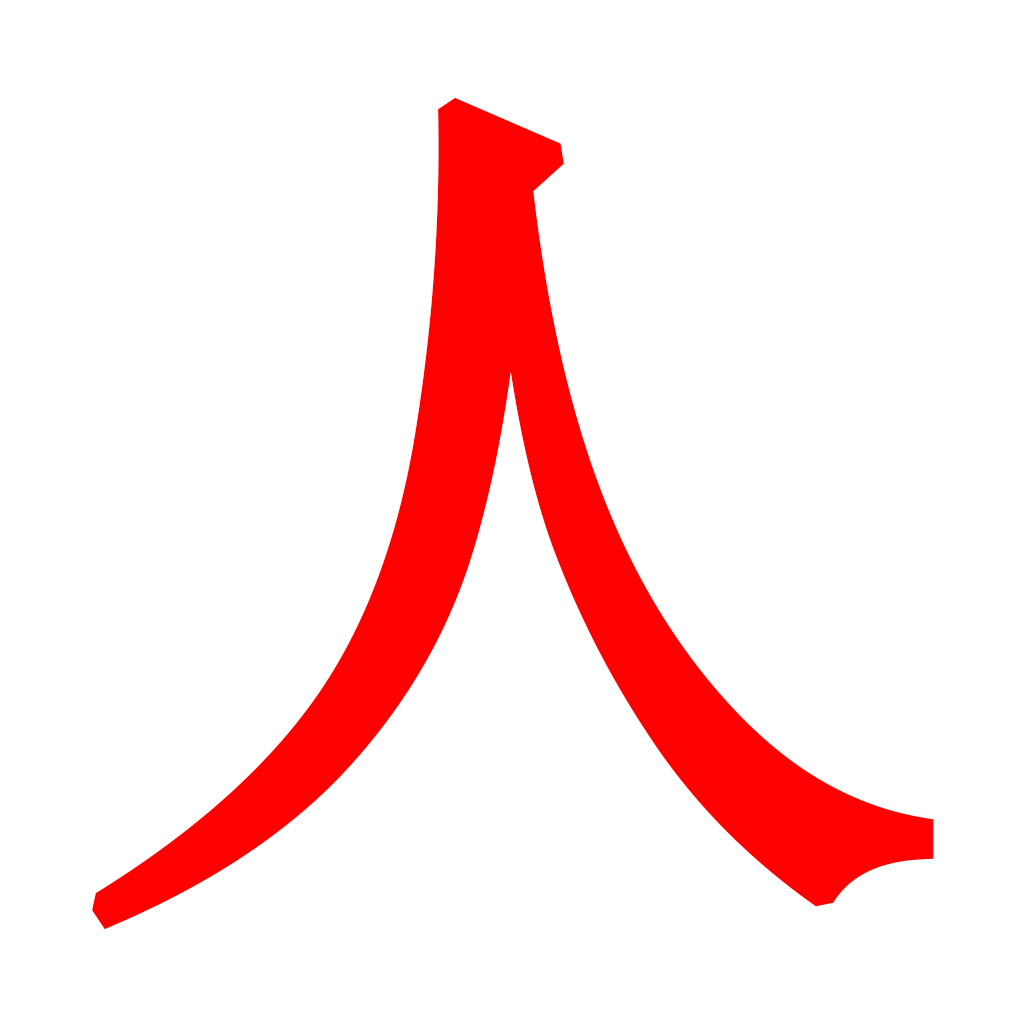
<style>
.page{position:relative;width:1024px;height:1024px;background:#ffffff}
.page>*{position:absolute;margin:0}
.t1{font:900px "SimSun";color:#ff0000;font-weight:bold}
</style>
<div class="page">
<p class="t1" style="left:92px;top:97px;width:842px;height:833px">人</p>
</div>
